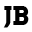
<style>
.page{position:relative;width:32px;height:32px;background:#ffffff}
.page>*{position:absolute;margin:0}
.t1{font:25.2px "Arvo-Bold";color:#000000}
</style>
<div class="page">
<p class="t1" style="left:3px;top:6px;width:26px;height:22px">JB</p>
</div>
